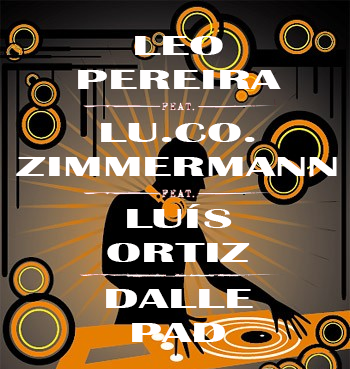
<style>
.page{position:relative;width:350px;height:369px}
.page>*{position:absolute;margin:0}
.t1{font:28px "BritannicBold";color:#fffefe;scale:1.94 1}
</style>
<div class="page">
<p class="t1" style="left:78px;top:36px;width:203px;height:53px;text-align:center">LEO<br>PEREIRA</p>
<p class="t1" style="left:16px;top:123px;width:321px;height:53px;text-align:center">LU.CO.<br>ZIMMERMANN</p>
<p class="t1" style="left:107px;top:204px;width:143px;height:58px;text-align:center">LUÍS<br>ORTIZ</p>
<p class="t1" style="left:106px;top:289px;width:147px;height:53px;text-align:center">DALLE<br>PAD</p>
</div>
